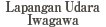
<style>
.page{position:relative;width:106px;height:27px;background:#ffffff}
.page>*{position:absolute;margin:0}
.t1{font:14px/13px "RyuminPro-ExBold";letter-spacing:-0.04em;color:#4c4843;scale:0.9 1}
</style>
<div class="page">
<p class="t1" style="left:5px;top:1px;width:95px;height:26px;text-align:center">Lapangan Udara<br>Iwagawa</p>
</div>
